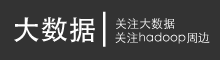
<style>
.page{position:relative;width:220px;height:60px;background:#333333}
.page>*{position:absolute;margin:0}
.t1{font:28px "STHeitiTC-Medium";color:#ffffff}
.t2{font:36px "STHeitiTC-Light";color:#ffffff}
.t3{font:12px "STHeitiTC-Light"}
.t4{font:12px "STHeitiTC-Light";color:#ffffff}
</style>
<div class="page">
<p class="t1" style="left:14px;top:17px;width:81px;height:26px">大数据</p>
<p class="t2" style="left:103px;top:11px;width:3px;height:36px">|</p>
<p class="t3" style="left:116px;top:18px;width:59px;height:12px">关注大数据</p>
<p class="t4" style="left:115px;top:32px;width:95px;height:12px">关注hadoop周边</p>
</div>
